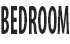
<style>
.page{position:relative;width:70px;height:44px;background:#ffffff}
.page>*{position:absolute;margin:0}
.t1{font:40.5px "MyriadPro-BoldCond";color:#252525;scale:0.5 1}
</style>
<div class="page">
<p class="t1" style="left:1px;top:6px;width:68px;height:28px">BEDROOM</p>
</div>
